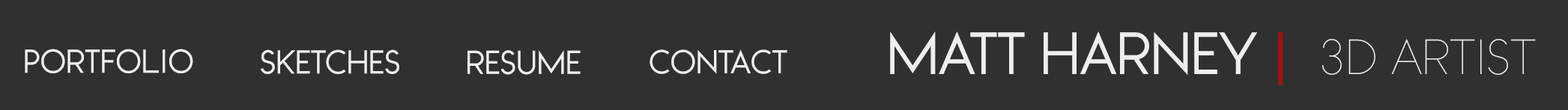
<style>
.page{position:relative;width:1568px;height:110px;background:#303030}
.page>*{position:absolute;margin:0}
.t1{font:13.5px "WatchwordRegularDemo";color:#eeeeee}
.t2{font:13.5px "WatchwordRegularDemo";color:#9f1313}
.t3{font:46.8px "WatchwordThinDemo";color:#eeeeee}
.t4{font:31.2px "WatchwordRegularDemo";color:#eeeeee}
</style>
<div class="page">
<p class="t1" style="left:890px;top:31px;width:646px;height:54px">MATT HARNEY <span class="t2">|  </span><span class="t3">3D ARTIST</span></p>
<p class="t4" style="left:25px;top:49px;width:168px;height:24px">PORTFOLIO</p>
<p class="t4" style="left:261px;top:49px;width:138px;height:25px">SKETCHES</p>
<p class="t4" style="left:467px;top:50px;width:114px;height:25px">RESUME</p>
<p class="t4" style="left:650px;top:49px;width:137px;height:25px">CONTACT</p>
</div>
